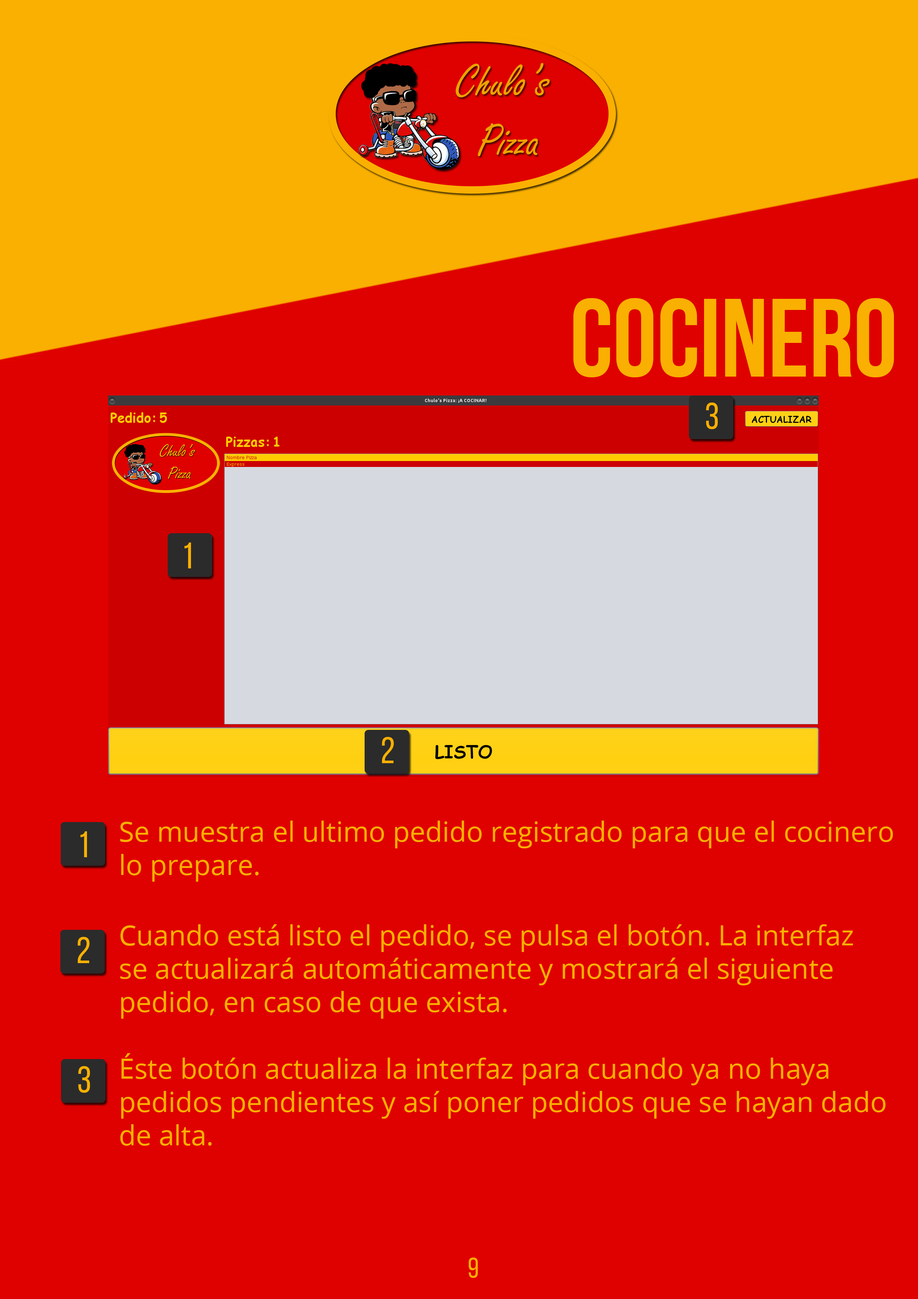
<style>
.page{position:relative;width:918px;height:1299px;background:#df0000}
.page>*{position:absolute;margin:0}
.t1{font:111.1px "BebasNeueBold";color:#fab000}
.t2{font:37px "BebasNeueRegular";color:#fab000}
.t3{font:27.8px "OpenSans";color:#fab000}
.t4{font:27.8px "BebasNeueRegular";color:#fab000}
</style>
<div class="page">
<p class="t1" style="left:573px;top:298px;width:321px;height:79px">Cocinero</p>
<p class="t2" style="left:706px;top:402px;width:12px;height:27px">3</p>
<p class="t2" style="left:184px;top:542px;width:7px;height:26px">1</p>
<p class="t2" style="left:382px;top:737px;width:12px;height:26px">2</p>
<p class="t3" style="left:120px;top:820px;width:773px;height:61px">Se muestra el ultimo pedido registrado para que el cocinero<br>lo prepare.</p>
<p class="t2" style="left:80px;top:831px;width:7px;height:26px">1</p>
<p class="t3" style="left:120px;top:924px;width:733px;height:94px">Cuando está listo el pedido, se pulsa el botón. La interfaz<br>se actualizará automáticamente y mostrará el siguiente<br>pedido, en caso de que exista.</p>
<p class="t2" style="left:78px;top:937px;width:12px;height:26px">2</p>
<p class="t3" style="left:120px;top:1053px;width:766px;height:92px">Éste botón actualiza la interfaz para cuando ya no haya <br>pedidos pendientes y así poner pedidos que se hayan dado<br>de alta.</p>
<p class="t2" style="left:78px;top:1066px;width:12px;height:27px">3</p>
<p class="t4" style="left:469px;top:1257px;width:9px;height:21px">9</p>
</div>
